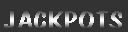
<style>
.page{position:relative;width:128px;height:32px;background:#333333}
.page>*{position:absolute;margin:0}
.t1{font:26.1px "DomCasualBT-Regular";scale:1.3 1}
</style>
<div class="page">
<p class="t1" style="left:4px;top:11px;width:118px;height:18px">JACKPOTS</p>
</div>
